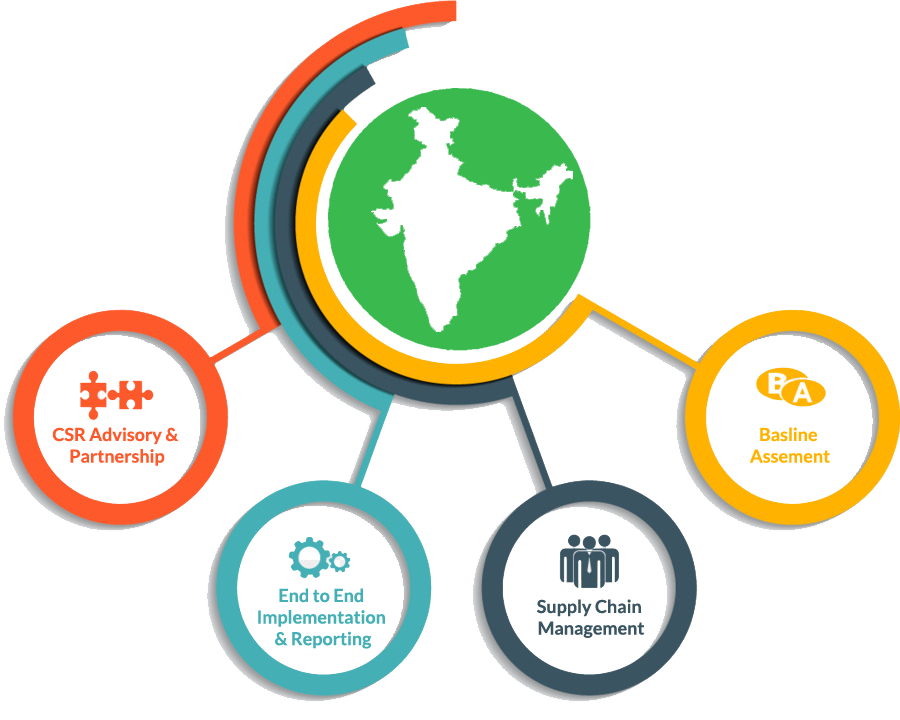
<style>
.page{position:relative;width:900px;height:720px;background:#ffffff}
.page>*{position:absolute;margin:0}
.t1{font:18px "Lato-Bold";color:#fe592b}
.t2{font:18px "Lato-Bold";color:#ffb200}
.t3{font:18px "Lato-Bold";color:#44afb5}
.t4{font:18px "Lato-Bold";color:#3a5461}
</style>
<div class="page">
<p class="t1" style="left:52px;top:427px;width:127px;height:39px;text-align:center">CSR Advisory &amp; <br>Partnership</p>
<p class="t2" style="left:750px;top:427px;width:80px;height:36px;text-align:center">Basline <br>Assement</p>
<p class="t3" style="left:258px;top:588px;width:127px;height:61px;text-align:center">End to End <br>Implementation <br>&amp; Reporting</p>
<p class="t4" style="left:537px;top:599px;width:108px;height:39px;text-align:center">Supply Chain <br>Management</p>
</div>
